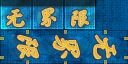
<style>
.page{position:relative;width:128px;height:64px}
.page>*{position:absolute;margin:0}
.t1{font:19px "JXC";color:#efcb39;font-weight:bold}
.t2{font:18px "JXC";color:#e8b324;font-weight:bold}
.t3{font:19px "JXC";color:#e8b224;font-weight:bold}
.t4{font:25px "JXC";color:#efcb39;font-weight:bold;font-style:italic}
.t5{font:26px "JXC";color:#efcb39;font-weight:bold;font-style:italic}
.t6{font:25px "JXC";color:#e8b426;font-weight:bold;font-style:italic}
</style>
<div class="page">
<p class="t1" style="left:7px;top:10px;width:17px;height:17px">无</p>
<p class="t2" style="left:41px;top:8px;width:15px;height:19px">界</p>
<p class="t3" style="left:71px;top:10px;width:18px;height:16px">限</p>
<p class="t4" style="left:17px;top:35px;width:22px;height:23px;rotate:90deg">限</p>
<p class="t5" style="left:53px;top:36px;width:27px;height:22px;rotate:90deg">界</p>
<p class="t6" style="left:94px;top:35px;width:22px;height:24px;rotate:90deg">无</p>
</div>
